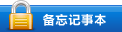
<style>
.page{position:relative;width:122px;height:32px}
.page>*{position:absolute;margin:0}
.t1{font:12px "MicrosoftYaHei";letter-spacing:0.075em;color:#ffffff}
</style>
<div class="page">
<p class="t1" style="left:43px;top:14px;width:63px;height:12px">备忘记事本</p>
</div>
